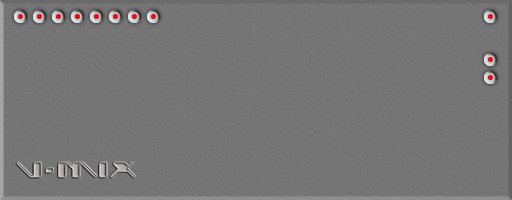
<style>
.page{position:relative;width:512px;height:200px;background:#757575}
.page>*{position:absolute;margin:0}
.t1{font:24px "Superglue";letter-spacing:0.05em}
</style>
<div class="page">
<p class="t1" style="left:16px;top:162px;width:119px;height:16px">V-MIX</p>
</div>
